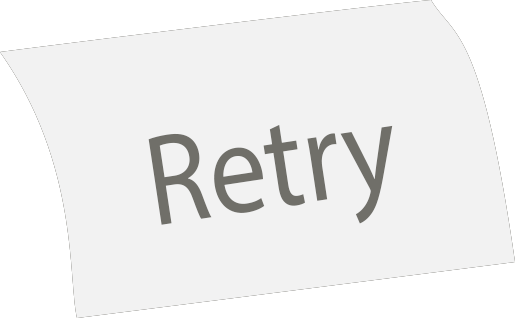
<style>
.page{position:relative;width:515px;height:318px;background:#f2f2f2}
.page>*{position:absolute;margin:0}
.t1{font:129.8px "MyriadPro-Regular";color:#706f69;scale:0.88 1}
</style>
<div class="page">
<p class="t1" style="left:148px;top:124px;width:245px;height:101px;rotate:-9deg">Retry</p>
</div>
